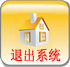
<style>
.page{position:relative;width:70px;height:67px}
.page>*{position:absolute;margin:0}
.t1{font:14px "SimSun";color:#fc0101;scale:0.9 1}
</style>
<div class="page">
<p class="t1" style="left:10px;top:48px;width:51px;height:14px">退出系统</p>
</div>
